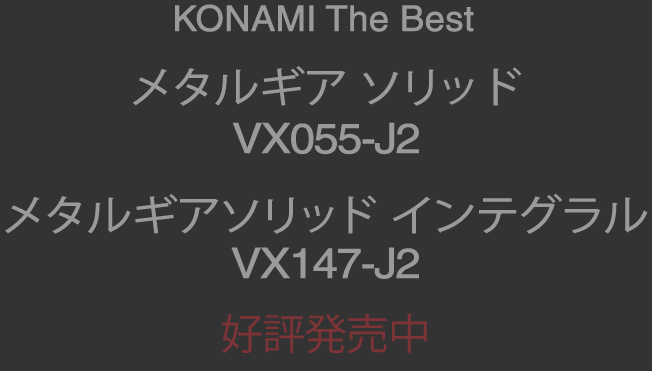
<style>
.page{position:relative;width:652px;height:371px;background:#333333}
.page>*{position:absolute;margin:0}
.t1{font:35.4px "Helvetica";letter-spacing:-0.016em;color:#9a9a9a;font-weight:bold}
.t2{font:41.8px "KozGoPr6N-Regular";letter-spacing:-0.016em;color:#9a9a9a;font-weight:bold;scale:1.08 1}
.t3{font:41.8px "KozGoPr6N-Regular";letter-spacing:-0.08em;color:#9a9a9a;font-weight:bold;scale:1.08 1}
.t4{font:41.8px "KozGoPr6N-Regular";letter-spacing:-0.12em;color:#9a9a9a;font-weight:bold;scale:1.08 1}
.t5{font:41.8px "Helvetica";letter-spacing:-0.06em;color:#9a9a9a;font-weight:bold;scale:1.08 1}
.t6{font:41.8px/47px "KozGoPr6N-Regular";letter-spacing:-0.02em;color:#9a9a9a;font-weight:bold;scale:1.09 1}
.t7{font:41.8px/47px "Helvetica";letter-spacing:-0.06em;color:#9a9a9a;font-weight:bold;scale:1.09 1}
.t8{font:42.4px "KozGoPr6N-Regular";letter-spacing:-0.02em;color:#7e3436}
</style>
<div class="page">
<p class="t1" style="left:175px;top:4px;width:299px;height:28px">KONAMI The Best</p>
<p class="t2" style="left:133px;top:66px;width:389px;height:89px;text-align:center">メタルギア ソリ<span class="t3">ッ </span><span class="t4">ド<br></span><span class="t5">VX055-J2</span></p>
<p class="t6" style="left:5px;top:193px;width:643px;height:86px;text-align:center">メタルギアソリッド インテグラル<br><span class="t7">VX147-J2</span></p>
<p class="t8" style="left:222px;top:313px;width:205px;height:41px">好評発売中</p>
</div>
